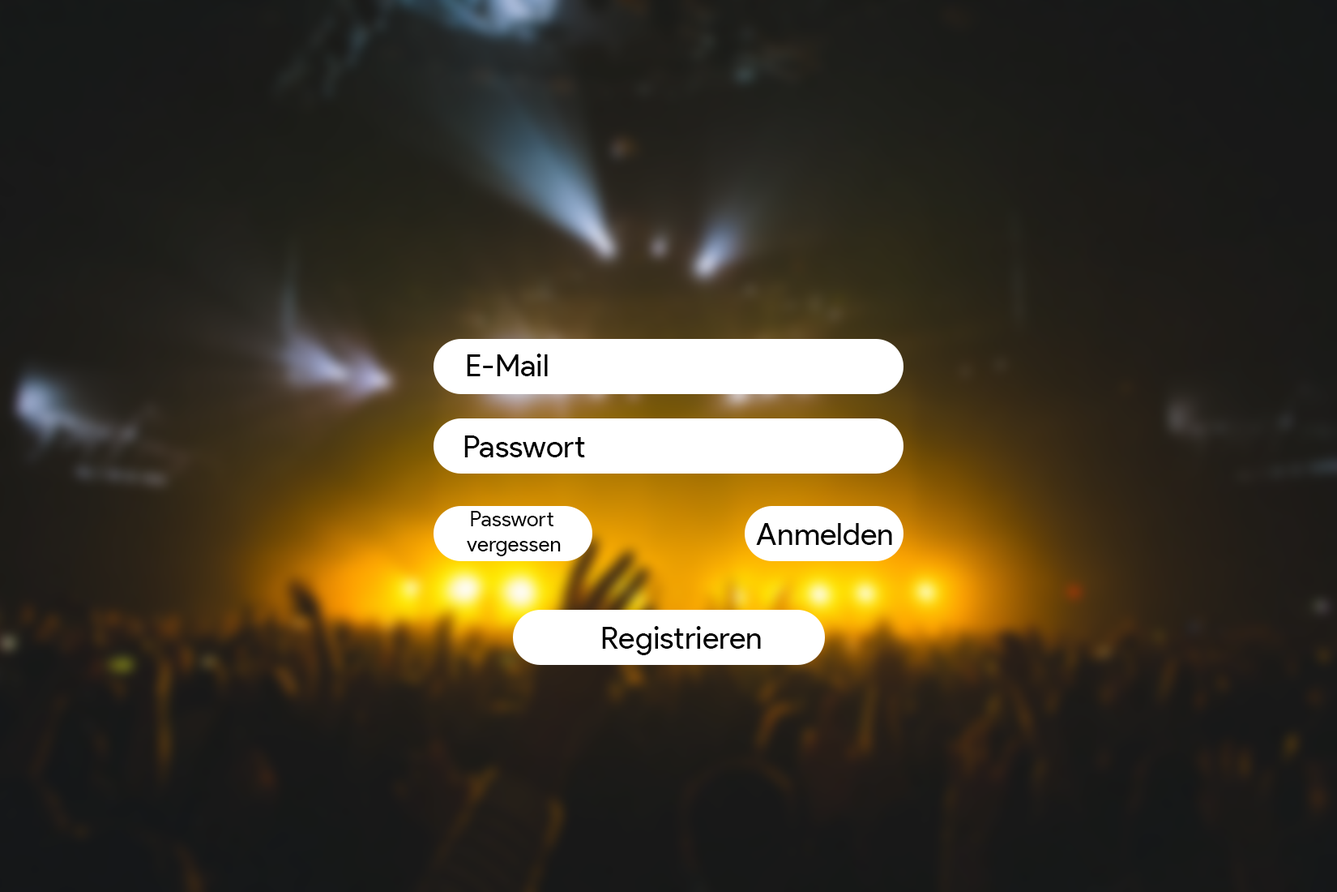
<style>
.page{position:relative;width:1337px;height:892px}
.page>*{position:absolute;margin:0}
.t1{font:30.9px "ProductSans-Regular";color:#000000}
.t2{font:21.2px "ProductSans-Regular";color:#000000}
</style>
<div class="page">
<p class="t1" style="left:467px;top:353px;width:81px;height:23px">E-Mail</p>
<p class="t1" style="left:464px;top:435px;width:121px;height:22px">Passwort</p>
<p class="t2" style="left:467px;top:511px;width:94px;height:45px;text-align:center">Passwort <br>vergessen</p>
<p class="t1" style="left:756px;top:523px;width:136px;height:22px">Anmelden</p>
<p class="t1" style="left:602px;top:626px;width:159px;height:29px">Registrieren</p>
</div>
